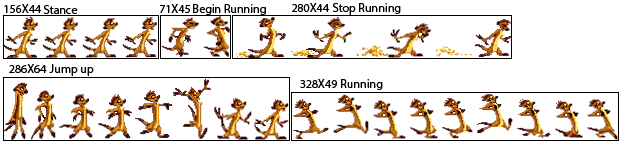
<style>
.page{position:relative;width:621px;height:142px;background:#ffffff}
.page>*{position:absolute;margin:0}
.t1{font:12px "MyriadPro-Regular";color:#000000}
</style>
<div class="page">
<p class="t1" style="left:4px;top:4px;width:38px;height:9px">156X44</p>
<p class="t1" style="left:43px;top:5px;width:35px;height:9px">Stance</p>
<p class="t1" style="left:159px;top:4px;width:31px;height:9px">71X45</p>
<p class="t1" style="left:193px;top:4px;width:73px;height:11px">Begin Running</p>
<p class="t1" style="left:292px;top:3px;width:38px;height:9px">280X44</p>
<p class="t1" style="left:332px;top:3px;width:69px;height:12px">Stop Running</p>
<p class="t1" style="left:9px;top:64px;width:38px;height:9px">286X64</p>
<p class="t1" style="left:49px;top:64px;width:45px;height:12px">Jump up</p>
<p class="t1" style="left:300px;top:79px;width:37px;height:9px">328X49</p>
<p class="t1" style="left:341px;top:79px;width:42px;height:11px">Running</p>
</div>
